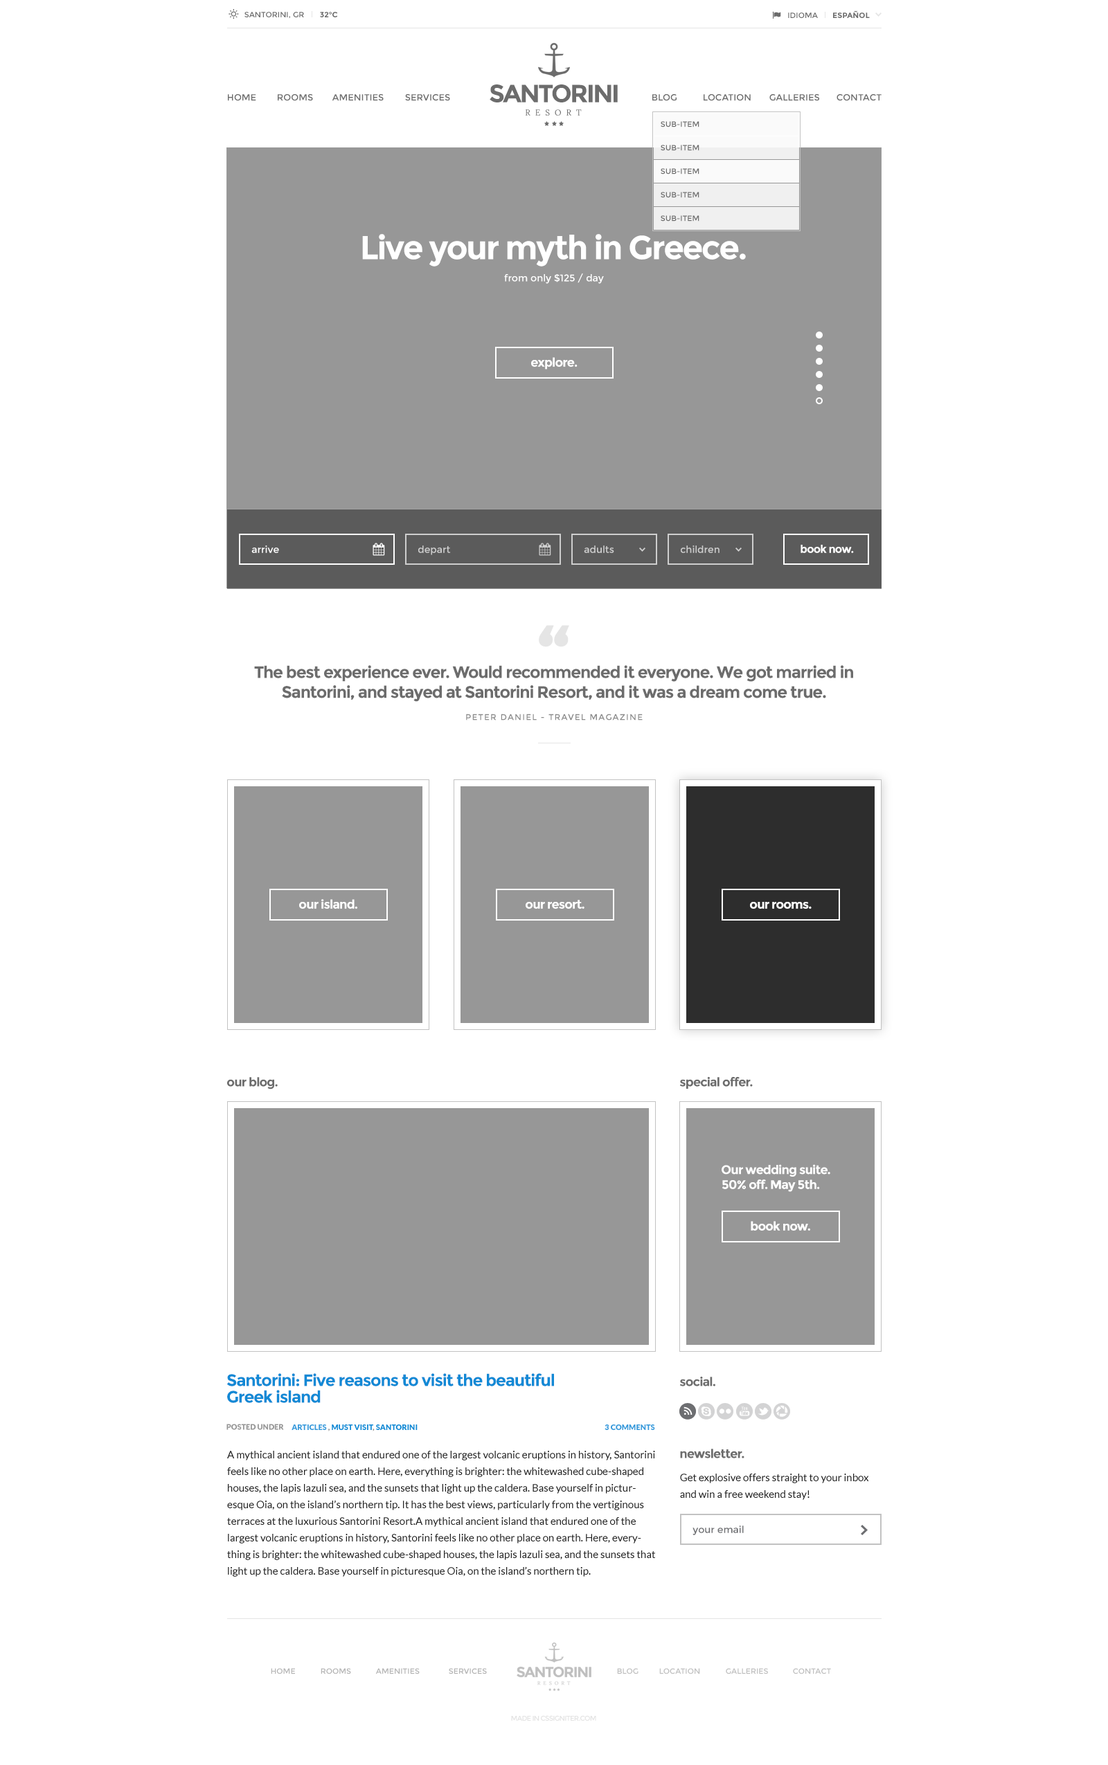
<style>
.page{position:relative;width:1108px;height:1765px;background:#ffffff}
.page>*{position:absolute;margin:0}
.t1{font:7.6px "Montserrat-Regular";color:#6c6c6c}
.t2{font:7.6px "Montserrat-Bold";color:#6c6c6c}
.t3{font:7.6px "Montserrat-Bold";color:#6c6c6c;text-transform:uppercase}
.t4{font:7.6px "Montserrat-Regular";color:#6c6c6c;text-transform:uppercase}
.t5{font:24.9px "Montserrat-Bold";letter-spacing:-0.07em;color:#6c6c6c}
.t6{font:9px "Montserrat-Regular";color:#6c6c6c}
.t7{font:8.3px "Lora";letter-spacing:0.58em;color:#6c6c6c}
.t8{font:33.2px "Montserrat-Bold";letter-spacing:-0.05em;color:#ffffff}
.t9{font:9.7px "Montserrat-Regular";color:#ffffff}
.t10{font:12.5px "Montserrat-Bold";letter-spacing:-0.05em;color:#ffffff}
.t11{font:9.7px "Montserrat-Regular";color:#cecece}
.t12{font:11.1px "Montserrat-Bold";letter-spacing:-0.05em;color:#ffffff}
.t13{font:83.1px "Montserrat-Bold";letter-spacing:-0.05em;color:#e4e4e4}
.t14{font:16.6px "Montserrat-Bold";letter-spacing:-0.05em;color:#6c6c6c}
.t15{font:8.3px "Montserrat-Regular";letter-spacing:0.1em;color:#8a8a8a}
.t16{font:12.5px "Montserrat-Bold";letter-spacing:-0.05em;color:#6c6c6c}
.t17{font:16.6px/16.6px "Montserrat-Bold";letter-spacing:-0.05em;color:#1289d5}
.t18{font:7.6px "Lato-Black";color:#969696}
.t19{font:7.6px "Lato-Black";color:#1289d5}
.t20{font:7.6px "Lato-Black";color:#3799db}
.t21{font:10.4px/16.6px "Lato-Regular";color:#1e1e1e}
.t22{font:9.7px "Montserrat-Regular";color:#6d6e71}
.t23{font:7.6px "Montserrat-Regular";color:#b4b4b4}
.t24{font:7.6px "Montserrat-Regular";color:#bfbfbf}
.t25{font:6.9px "Montserrat-Regular";letter-spacing:-0.07em;color:#e3e3e3}
</style>
<div class="page">
<p class="t1" style="left:244px;top:12px;width:60px;height:7px">SANTORINI, GR</p>
<p class="t2" style="left:320px;top:12px;width:18px;height:5px">32°C</p>
<p class="t3" style="left:788px;top:10px;width:82px;height:8px"><span class="t4">idioma       </span>Español</p>
<p class="t5" style="left:489px;top:84px;width:129px;height:18px">SANTORINI</p>
<p class="t6" style="left:228px;top:94px;width:28px;height:7px">HOME</p>
<p class="t6" style="left:278px;top:94px;width:35px;height:7px">ROOMS</p>
<p class="t6" style="left:332px;top:94px;width:52px;height:7px">AMENITIES</p>
<p class="t6" style="left:405px;top:94px;width:45px;height:7px">SERVICES</p>
<p class="t6" style="left:652px;top:94px;width:24px;height:7px">BLOG</p>
<p class="t6" style="left:703px;top:94px;width:47px;height:7px">LOCATION</p>
<p class="t6" style="left:769px;top:94px;width:50px;height:7px">GALLERIES</p>
<p class="t6" style="left:836px;top:94px;width:45px;height:7px">CONTACT</p>
<p class="t7" style="left:525px;top:109px;width:57px;height:7px">RESORT</p>
<p class="t1" style="left:660px;top:121px;width:39px;height:6px">SUB-ITEM</p>
<p class="t1" style="left:660px;top:145px;width:39px;height:6px">SUB-ITEM</p>
<p class="t1" style="left:660px;top:168px;width:39px;height:6px">SUB-ITEM</p>
<p class="t1" style="left:660px;top:192px;width:39px;height:6px">SUB-ITEM</p>
<p class="t1" style="left:660px;top:215px;width:39px;height:7px">SUB-ITEM</p>
<p class="t8" style="left:362px;top:234px;width:384px;height:33px">Live your myth in Greece.</p>
<p class="t9" style="left:504px;top:273px;width:100px;height:11px">from only $125 / day</p>
<p class="t10" style="left:531px;top:357px;width:46px;height:13px">explore.</p>
<p class="t9" style="left:251px;top:546px;width:28px;height:7px">arrive</p>
<p class="t11" style="left:418px;top:546px;width:33px;height:9px">depart</p>
<p class="t11" style="left:584px;top:546px;width:30px;height:7px">adults</p>
<p class="t11" style="left:681px;top:546px;width:38px;height:7px">children</p>
<p class="t12" style="left:800px;top:545px;width:54px;height:8px">book now.</p>
<p class="t13" style="left:539px;top:625px;width:30px;height:22px">“</p>
<p class="t14" style="left:254px;top:665px;width:599px;height:37px;text-align:center">The best experience ever. Would recommended it everyone. We got married in<br>Santorini, and stayed at Santorini Resort, and it was a dream come true.</p>
<p class="t15" style="left:466px;top:714px;width:176px;height:7px">PETER DANIEL - TRAVEL MAGAZINE</p>
<p class="t10" style="left:299px;top:899px;width:58px;height:10px">our island.</p>
<p class="t10" style="left:525px;top:900px;width:59px;height:9px">our resort.</p>
<p class="t10" style="left:750px;top:902px;width:61px;height:7px">our rooms.</p>
<p class="t16" style="left:227px;top:1077px;width:51px;height:13px">our blog.</p>
<p class="t16" style="left:679px;top:1077px;width:74px;height:12px">special offer.</p>
<p class="t10" style="left:721px;top:1164px;width:109px;height:28px">Our wedding suite.<br>50% off. May 5th.</p>
<p class="t10" style="left:750px;top:1221px;width:60px;height:10px">book now.</p>
<p class="t17" style="left:226px;top:1374px;width:328px;height:29px">Santorini: Five reasons to visit the beautiful<br>Greek island</p>
<p class="t16" style="left:679px;top:1376px;width:36px;height:11px">social.</p>
<p class="t18" style="left:226px;top:1424px;width:58px;height:6px">POSTED UNDER</p>
<p class="t19" style="left:291px;top:1425px;width:126px;height:7px"><span class="t20">ARTICLES</span><span class="t18"> , </span>MUST VISIT<span class="t18">, </span>SANTORINI</p>
<p class="t20" style="left:604px;top:1425px;width:51px;height:5px">3 COMMENTS</p>
<p class="t21" style="left:227px;top:1451px;width:428px;height:126px">A mythical ancient island that endured one of the largest volcanic eruptions in history, Santorini feels like no other place on earth. Here, everything is brighter: the whitewashed cube-shaped houses, the lapis lazuli sea, and the sunsets that light up the caldera. Base yourself in picturesque Oia, on the island’s northern tip. It has the best views, particularly from the vertiginous terraces at the luxurious Santorini Resort.A mythical ancient island that endured one of the largest volcanic eruptions in history, Santorini feels like no other place on earth. Here, everything is brighter: the whitewashed cube-shaped houses, the lapis lazuli sea, and the sunsets that light up the caldera. Base yourself in picturesque Oia, on the island’s northern tip.</p>
<p class="t16" style="left:680px;top:1449px;width:64px;height:10px">newsletter.</p>
<p class="t21" style="left:680px;top:1474px;width:189px;height:26px">Get explosive offers straight to your inbox and win a free weekend stay!</p>
<p class="t22" style="left:692px;top:1526px;width:52px;height:10px">your email</p>
<p class="t23" style="left:271px;top:1668px;width:24px;height:7px">HOME</p>
<p class="t23" style="left:321px;top:1668px;width:30px;height:7px">ROOMS</p>
<p class="t23" style="left:375px;top:1668px;width:45px;height:7px">AMENITIES</p>
<p class="t23" style="left:449px;top:1668px;width:38px;height:7px">SERVICES</p>
<p class="t24" style="left:617px;top:1668px;width:21px;height:7px">BLOG</p>
<p class="t24" style="left:659px;top:1668px;width:41px;height:7px">LOCATION</p>
<p class="t24" style="left:726px;top:1668px;width:42px;height:7px">GALLERIES</p>
<p class="t24" style="left:793px;top:1668px;width:38px;height:7px">CONTACT</p>
<p class="t25" style="left:511px;top:1716px;width:85px;height:5px">MADE IN CSSIGNITER.COM</p>
</div>
